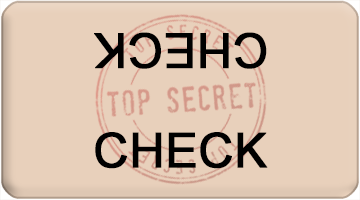
<style>
.page{position:relative;width:360px;height:200px;background:#e8d0bb}
.page>*{position:absolute;margin:0}
.t1{font:48px "ArialMT";color:#000000;font-weight:bold}
</style>
<div class="page">
<p class="t1" style="left:94px;top:32px;width:173px;height:37px;rotate:180deg">CHECK</p>
<p class="t1" style="left:95px;top:132px;width:173px;height:37px">CHECK</p>
</div>
